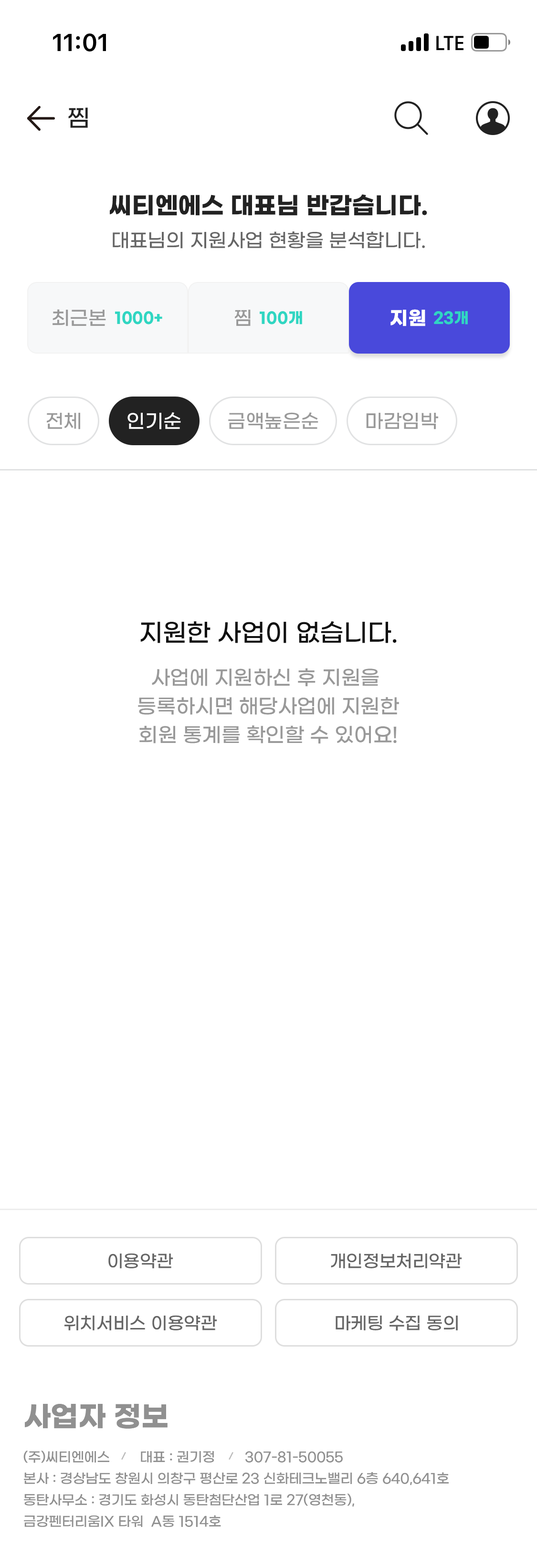
<style>
.page{position:relative;width:537px;height:1568px;background:#ffffff}
.page>*{position:absolute;margin:0}
.t1{font:23.9px "GmarketSansMedium";color:#222222}
.t2{font:23.9px "GmarketSansBold";color:#222222}
.t3{font:19.1px "GmarketSansMedium";color:#666666}
.t4{font:19.1px "GmarketSansMedium";color:#999999}
.t5{font:15.3px "GmarketSansBold";color:#30d6c2}
.t6{font:19.1px "GmarketSansMedium";letter-spacing:0.01em;color:#999999}
.t7{font:15.3px "GmarketSansBold";letter-spacing:0.01em;color:#30d6c2}
.t8{font:19.1px "GmarketSansBold";color:#ffffff}
.t9{font:19.1px "GmarketSansMedium";color:#ffffff}
.t10{font:24.8px "GmarketSansMedium";color:#101010}
.t11{font:20px/28.6px "GmarketSansMedium";color:#999999}
.t12{font:17.2px "GmarketSansMedium";color:#666666}
.t13{font:28.6px "GmarketSansBold";color:#909090}
.t14{font:13.4px/21.5px "GmarketSansMedium";color:#909090}
</style>
<div class="page">
<p class="t1" style="left:68px;top:107px;width:20px;height:21px">찜</p>
<p class="t2" style="left:110px;top:194px;width:317px;height:22px">씨티엔에스 대표님 반갑습니다.</p>
<p class="t3" style="left:113px;top:231px;width:312px;height:18px">대표님의 지원사업 현황을 분석합니다.</p>
<p class="t4" style="left:52px;top:309px;width:54px;height:17px">최근본</p>
<p class="t5" style="left:115px;top:311px;width:47px;height:13px">1000+</p>
<p class="t6" style="left:235px;top:310px;width:16px;height:16px">찜</p>
<p class="t7" style="left:260px;top:311px;width:42px;height:13px">100개</p>
<p class="t8" style="left:390px;top:309px;width:35px;height:17px">지원</p>
<p class="t5" style="left:434px;top:311px;width:34px;height:13px">23개</p>
<p class="t4" style="left:47px;top:413px;width:33px;height:16px">전체</p>
<p class="t9" style="left:127px;top:412px;width:54px;height:17px">인기순</p>
<p class="t4" style="left:228px;top:412px;width:90px;height:17px">금액높은순</p>
<p class="t4" style="left:366px;top:413px;width:72px;height:16px">마감임박</p>
<p class="t10" style="left:140px;top:621px;width:257px;height:22px">지원한 사업이 없습니다.</p>
<p class="t11" style="left:138px;top:668px;width:261px;height:76px;text-align:center">사업에 지원하신 후 지원을 <br>등록하시면 해당사업에 지원한<br>회원 통계를 확인할 수 있어요!</p>
<p class="t12" style="left:108px;top:1253px;width:65px;height:15px">이용약관</p>
<p class="t12" style="left:331px;top:1253px;width:131px;height:15px">개인정보처리약관</p>
<p class="t12" style="left:64px;top:1315px;width:153px;height:15px">위치서비스 이용약관</p>
<p class="t12" style="left:335px;top:1315px;width:123px;height:16px">마케팅 수집 동의</p>
<p class="t13" style="left:25px;top:1404px;width:142px;height:25px">사업자 정보</p>
<p class="t14" style="left:23px;top:1451px;width:426px;height:76px">(주)씨티엔에스        대표 : 권기정        307-81-50055<br>본사 : 경상남도 창원시 의창구 평산로 23 신화테크노밸리 6층 640,641호<br>동탄사무소 : 경기도 화성시 동탄첨단산업 1로 27(영천동),<br>금강펜터리움IX 타워  A동 1514호</p>
</div>
